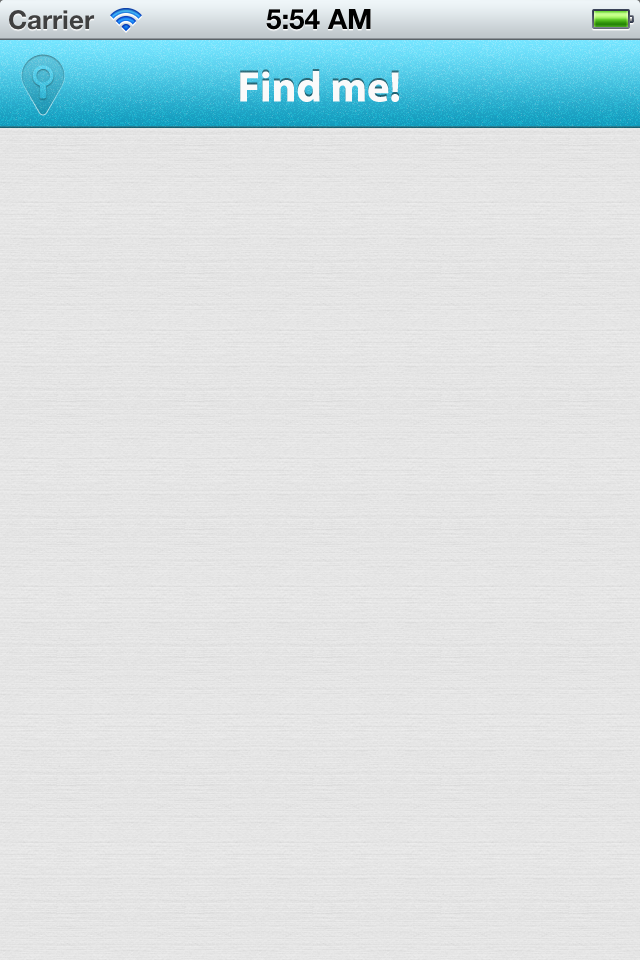
<style>
.page{position:relative;width:640px;height:960px}
.page>*{position:absolute;margin:0}
.t1{font:42.5px "MyriadPro-Bold";color:#fafafa}
</style>
<div class="page">
<p class="t1" style="left:240px;top:71px;width:159px;height:31px">Find me!</p>
</div>
